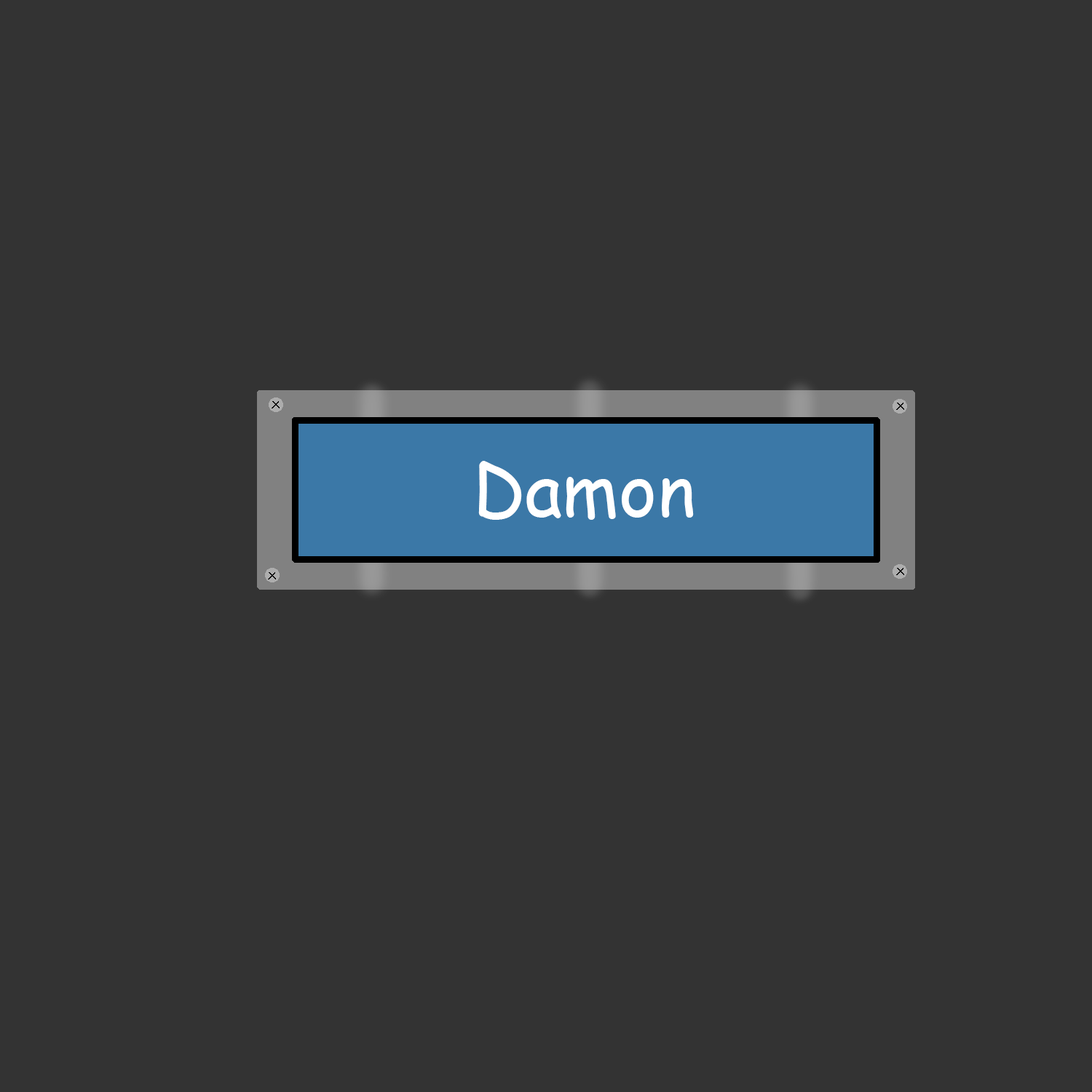
<style>
.page{position:relative;width:1092px;height:1092px;background:#333333}
.page>*{position:absolute;margin:0}
.t1{font:72.8px "ComicSansMS";color:#ffffff}
</style>
<div class="page">
<p class="t1" style="left:478px;top:461px;width:216px;height:59px">Damon</p>
</div>
